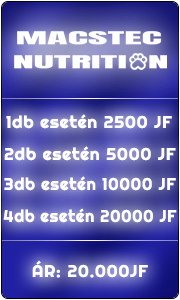
<style>
.page{position:relative;width:180px;height:300px}
.page>*{position:absolute;margin:0}
.t1{font:16.7px "Righteous-Regular";letter-spacing:0.035em;color:#ffffff;font-weight:bold}
.t2{font:16.7px "Righteous-Regular";letter-spacing:0.035em;color:#ffffff;font-weight:bold;scale:0.96 1}
.t3{font:16.7px "Righteous-Regular";letter-spacing:0.035em;color:#ffffff;font-weight:bold;scale:0.94 1}
</style>
<div class="page">
<p class="t1" style="left:6px;top:114px;width:166px;height:15px">1db esetén 2500 JF</p>
<p class="t1" style="left:4px;top:146px;width:172px;height:15px">2db esetén 5000 JF</p>
<p class="t2" style="left:4px;top:176px;width:172px;height:15px">3db esetén 10000 JF</p>
<p class="t3" style="left:3px;top:208px;width:174px;height:15px">4db esetén 20000 JF</p>
<p class="t1" style="left:32px;top:260px;width:116px;height:18px">ÁR: 20.000JF</p>
</div>
